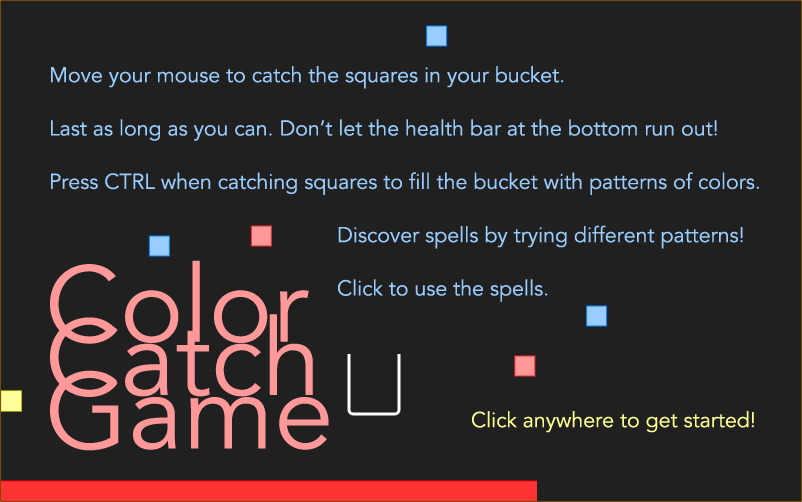
<style>
.page{position:relative;width:802px;height:502px;background:#202020}
.page>*{position:absolute;margin:0}
.t1{font:21.3px/53.3px "Avenir-Book";color:#99ccff}
.t2{font:106.7px/53.3px "Avenir-Book";color:#ff9899}
.t3{font:21.3px "Avenir-Book";color:#feff93}
</style>
<div class="page">
<p class="t1" style="left:51px;top:66px;width:708px;height:236px">Move your mouse to catch the squares in your bucket.<br>Last as long as you can. Don’t let the health bar at the bottom run out!<br>Press CTRL when catching squares to fill the bucket with patterns of colors.<br>        Discover spells by trying different patterns!<br>        Click to use the spells.</p>
<p class="t2" style="left:50px;top:260px;width:279px;height:191px">Color<br>Catch<br>Game</p>
<p class="t3" style="left:472px;top:411px;width:282px;height:22px">Click anywhere to get started!</p>
</div>
